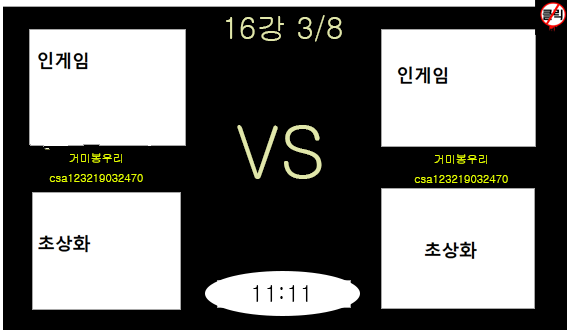
<style>
.page{position:relative;width:567px;height:332px;background:#000000}
.page>*{position:absolute;margin:0}
.t1{font:30px "Gulim";color:#e1e7aa}
.t2{font:72px "Gulim";color:#e1e7aa}
.t3{font:11px "Gulim";color:#e6ff00}
.t4{font:24px "Gulim";color:#000000}
</style>
<div class="page">
<p class="t1" style="left:226px;top:15px;width:116px;height:27px">16강 3/8</p>
<p class="t2" style="left:237px;top:125px;width:85px;height:54px">VS</p>
<p class="t3" style="left:49px;top:153px;width:94px;height:29px;text-align:center">거미봉우리<br>csa123219032470<br>ㄴㅁㄴ</p>
<p class="t3" style="left:414px;top:154px;width:94px;height:29px;text-align:center">거미봉우리<br>csa123219032470<br>ㄴㅁㄴ</p>
<p class="t4" style="left:253px;top:285px;width:55px;height:17px">11:11</p>
</div>
